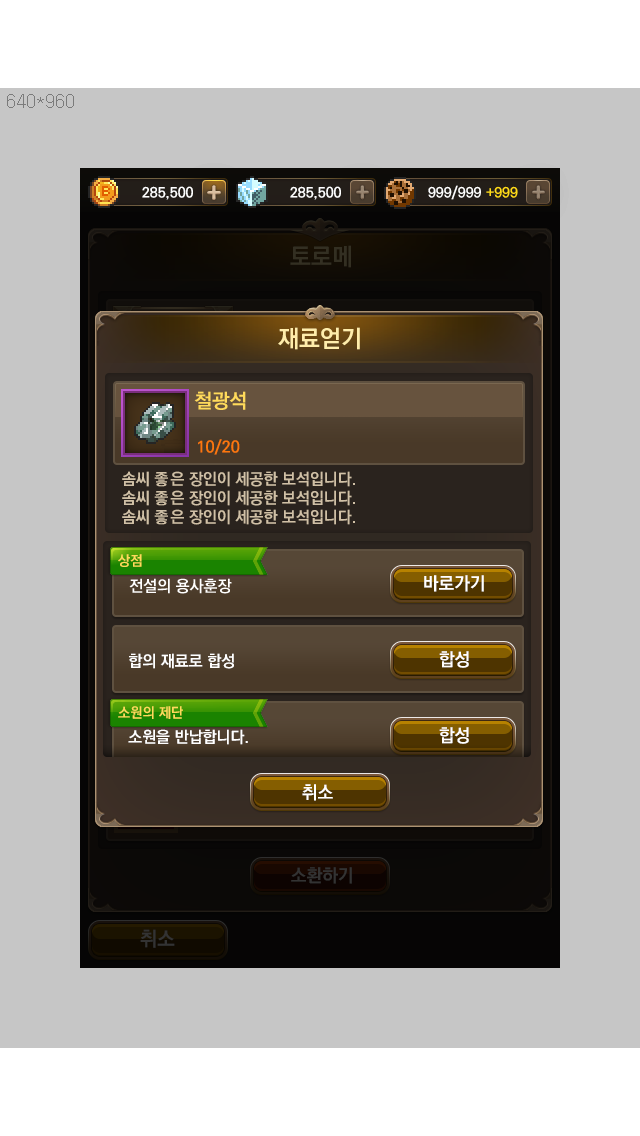
<style>
.page{position:relative;width:640px;height:1136px;background:#c6c6c6}
.page>*{position:absolute;margin:0}
.t1{font:24px "KoPubDotumBold";color:#ffedab}
.t2{font:20px "KoPubDotumBold";color:#ffda5b}
.t3{font:16px "KoPubDotumBold";color:#fe770c}
.t4{font:16px "KoPubDotumBold";color:#d0c0a6}
.t5{font:14px "KoPubDotumBold";color:#ffda5b}
.t6{font:18px "KoPubDotumBold";color:#ffffff}
.t7{font:16px "KoPubDotumBold";color:#ffffff}
</style>
<div class="page">
<p class="t1" style="left:278px;top:327px;width:82px;height:23px">재료얻기</p>
<p class="t2" style="left:194px;top:391px;width:52px;height:19px">철광석</p>
<p class="t3" style="left:198px;top:439px;width:42px;height:16px">10/20</p>
<p class="t4" style="left:122px;top:471px;width:233px;height:54px">솜씨 좋은 장인이 세공한 보석입니다. <br>솜씨 좋은 장인이 세공한 보석입니다. <br>솜씨 좋은 장인이 세공한 보석입니다.</p>
<p class="t5" style="left:118px;top:554px;width:24px;height:13px">상점</p>
<p class="t6" style="left:424px;top:575px;width:60px;height:17px">바로가기</p>
<p class="t7" style="left:129px;top:653px;width:105px;height:16px">합의 재료로 합성</p>
<p class="t6" style="left:439px;top:651px;width:30px;height:17px">합성</p>
<p class="t5" style="left:118px;top:706px;width:65px;height:13px">소원의 제단</p>
</div>
